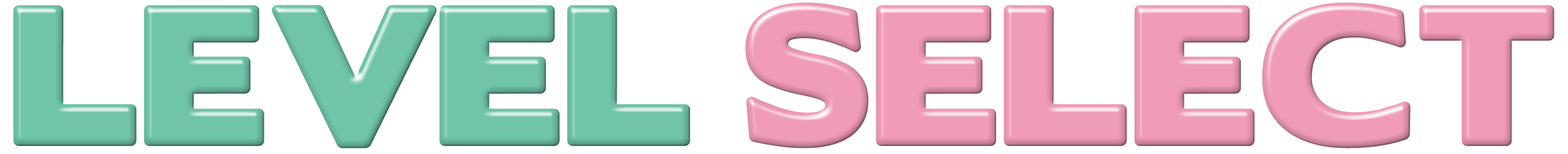
<style>
.page{position:relative;width:1568px;height:154px;background:#ffffff}
.page>*{position:absolute;margin:0}
.t1{font:178.9px "BorisBlackBloxx";color:#f19cb7}
.t2{font:178.9px "BorisBlackBloxx";color:#6fc4a9}
</style>
<div class="page">
<p class="t1" style="left:13px;top:2px;width:1541px;height:146px"><span class="t2">LEVEL </span>SELECT</p>
</div>
